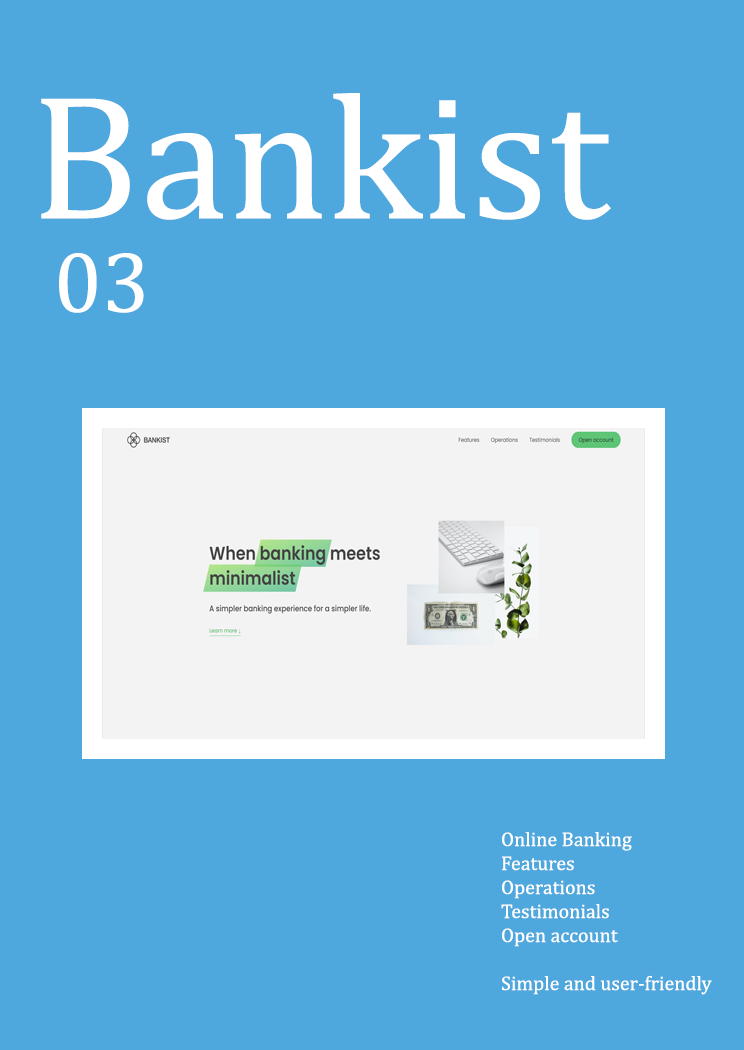
<style>
.page{position:relative;width:744px;height:1050px;background:#4ea8de}
.page>*{position:absolute;margin:0}
.t1{font:179.3px "Cambria";color:#ffffff}
.t2{font:87.3px "Cambria";color:#ffffff}
.t3{font:20px "Cambria";color:#ffffff}
</style>
<div class="page">
<p class="t1" style="left:41px;top:93px;width:570px;height:127px">Bankist</p>
<p class="t2" style="left:59px;top:253px;width:85px;height:60px">03</p>
<p class="t3" style="left:501px;top:832px;width:211px;height:163px">Online Banking <br>Features<br>Operations<br>Testimonials<br>Open account<br><br>Simple and user-friendly</p>
</div>
